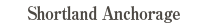
<style>
.page{position:relative;width:208px;height:27px;background:#ffffff}
.page>*{position:absolute;margin:0}
.t1{font:18px "RyuminPro-ExBold";letter-spacing:-0.04em;color:#4c4843;scale:0.9 1}
</style>
<div class="page">
<p class="t1" style="left:27px;top:6px;width:153px;height:17px">Shortland Anchorage</p>
</div>
